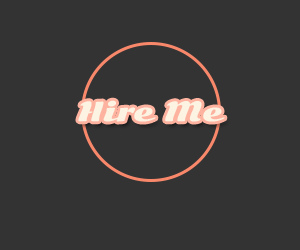
<style>
.page{position:relative;width:300px;height:250px;background:#333333}
.page>*{position:absolute;margin:0}
.t1{font:26px "SonsieOne-Regular";letter-spacing:0.005em;color:#fdf3e2}
</style>
<div class="page">
<p class="t1" style="left:78px;top:100px;width:147px;height:22px">Hire Me</p>
</div>
